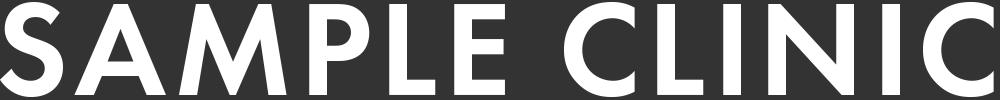
<style>
.page{position:relative;width:1000px;height:100px;background:#333333}
.page>*{position:absolute;margin:0}
.t1{font:137.1px "FuturaPT-Demi";letter-spacing:0.05em;color:#ffffff}
</style>
<div class="page">
<p class="t1" style="left:0px;top:2px;width:994px;height:95px">SAMPLE CLINIC</p>
</div>
